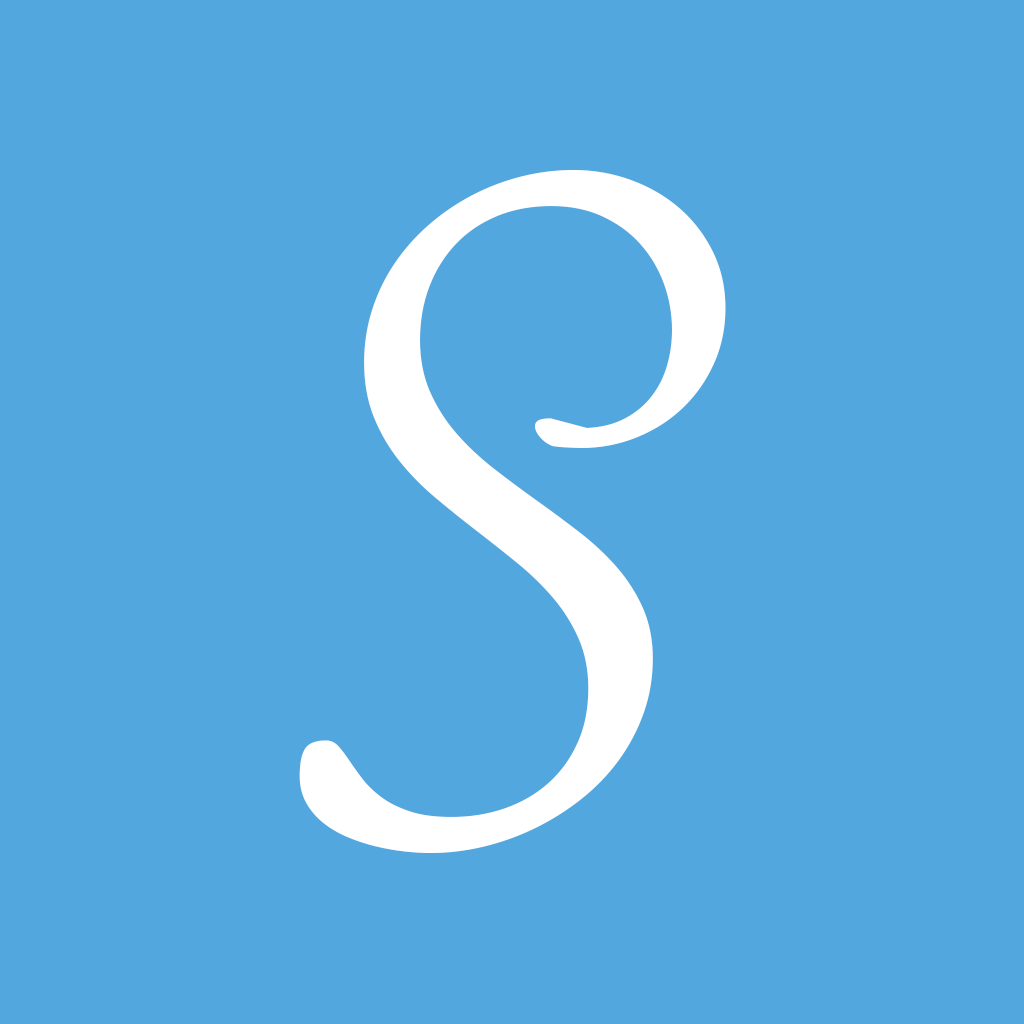
<style>
.page{position:relative;width:1024px;height:1024px;background:#52a7df}
.page>*{position:absolute;margin:0}
.t1{font:729.2px "akaDora";color:#ffffff}
</style>
<div class="page">
<p class="t1" style="left:299px;top:170px;width:427px;height:683px">S</p>
</div>
